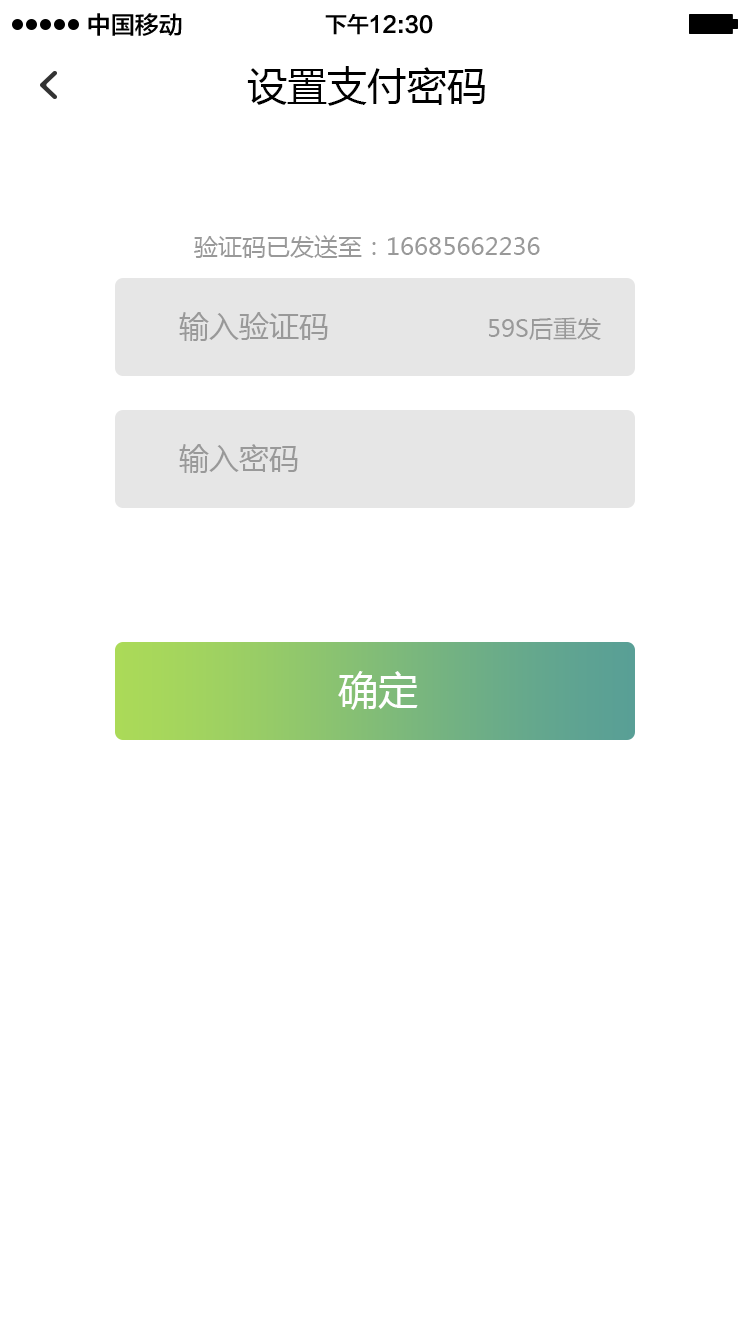
<style>
.page{position:relative;width:750px;height:1334px;background:#ffffff}
.page>*{position:absolute;margin:0}
.t1{font:24px "FZLTZHK--GBK1-0";color:#000000}
.t2{font:22px "FZLTZHK--GBK1-0";color:#000000}
.t3{font:40px "MicrosoftYaHei";color:#000000}
.t4{font:24px "MicrosoftYaHei";color:#999999}
.t5{font:30px "MicrosoftYaHei";color:#999999}
.t6{font:40px "MicrosoftYaHei";color:#ffffff}
</style>
<div class="page">
<p class="t1" style="left:88px;top:13px;width:94px;height:23px">中国移动</p>
<p class="t2" style="left:325px;top:14px;width:108px;height:21px">下午12:30</p>
<p class="t3" style="left:247px;top:66px;width:238px;height:40px">设置支付密码</p>
<p class="t4" style="left:194px;top:235px;width:346px;height:23px">验证码已发送至：16685662236</p>
<p class="t5" style="left:179px;top:312px;width:149px;height:29px">输入验证码</p>
<p class="t4" style="left:489px;top:317px;width:112px;height:23px">59S后重发</p>
<p class="t5" style="left:179px;top:444px;width:119px;height:29px">输入密码</p>
<p class="t6" style="left:338px;top:671px;width:80px;height:39px">确定</p>
</div>
